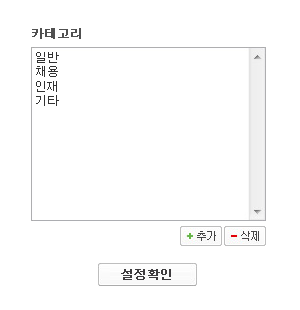
<style>
.page{position:relative;width:300px;height:310px;background:#ffffff}
.page>*{position:absolute;margin:0}
.t1{font:12px "Dotum";color:#505050;font-weight:bold}
.t2{font:12px "Dotum";color:#323232}
.t3{font:12px "Dotum";color:#3e3c3e;font-weight:bold}
</style>
<div class="page">
<p class="t1" style="left:32px;top:28px;width:49px;height:11px">카테고리</p>
<p class="t2" style="left:36px;top:52px;width:23px;height:54px">일반<br>채용<br>인재<br>기타</p>
<p class="t3" style="left:121px;top:269px;width:50px;height:11px">설정확인</p>
</div>
